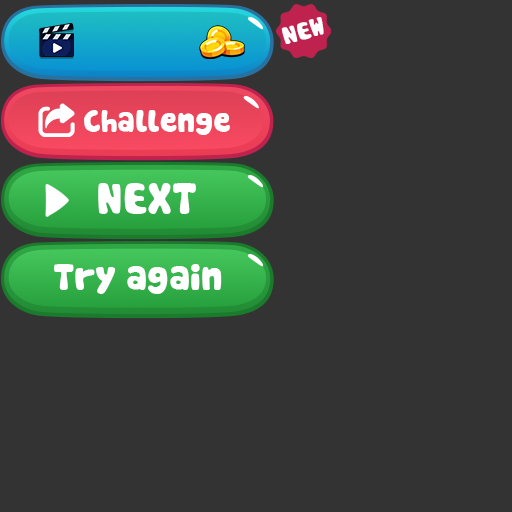
<style>
.page{position:relative;width:512px;height:512px;background:#333333}
.page>*{position:absolute;margin:0}
.t1{font:24px "Cookies";color:#ffffff}
.t2{font:30px "Cookies";color:#ffffff}
.t3{font:42.4px "Cookies";color:#ffffff}
.t4{font:36px "Cookies";color:#ffffff}
</style>
<div class="page">
<p class="t1" style="left:281px;top:17px;width:43px;height:27px;rotate:-15deg">NEW</p>
<p class="t2" style="left:84px;top:110px;width:146px;height:25px">Challenge</p>
<p class="t3" style="left:98px;top:183px;width:98px;height:31px">NEXT</p>
<p class="t4" style="left:54px;top:264px;width:168px;height:30px">Try again</p>
</div>
